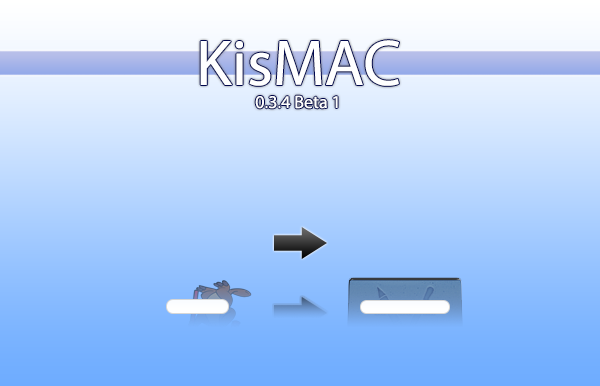
<style>
.page{position:relative;width:600px;height:386px}
.page>*{position:absolute;margin:0}
.t1{font:65px "MyriadPro-Regular";color:#ffffff}
.t2{font:18px "MyriadPro-Regular";color:#ffffff}
</style>
<div class="page">
<p class="t1" style="left:200px;top:40px;width:199px;height:46px">KisMAC</p>
<p class="t2" style="left:255px;top:95px;width:83px;height:14px">0.3.4 Beta 1</p>
</div>
